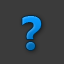
<style>
.page{position:relative;width:64px;height:64px;background:#3b3b3b}
.page>*{position:absolute;margin:0}
.t1{font:48px "SegoeUI-Bold"}
</style>
<div class="page">
<p class="t1" style="left:22px;top:16px;width:20px;height:34px">?</p>
</div>
